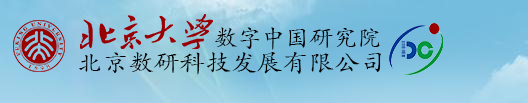
<style>
.page{position:relative;width:528px;height:103px}
.page>*{position:absolute;margin:0}
.t1{font:24px "STKaiti";color:#000000}
.t2{font:24.2px "STKaiti";color:#000000;scale:1.06 1}
</style>
<div class="page">
<p class="t1" style="left:215px;top:27px;width:165px;height:23px">数字中国研究院</p>
<p class="t2" style="left:79px;top:52px;width:302px;height:23px">北京数研科技发展有限公司</p>
</div>
